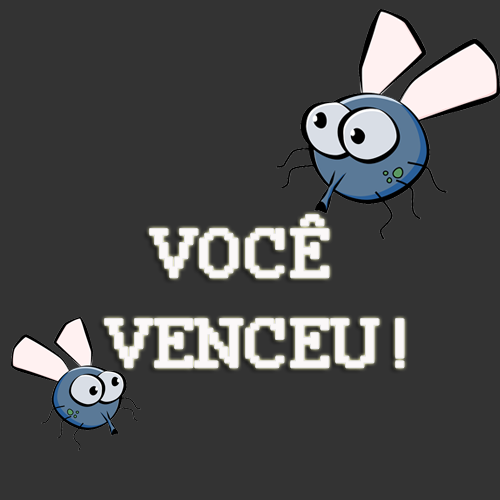
<style>
.page{position:relative;width:500px;height:500px;background:#333333}
.page>*{position:absolute;margin:0}
.t1{font:75.2px "Courier";color:#fbf8f8;font-weight:bold;scale:1.06 1}
</style>
<div class="page">
<p class="t1" style="left:105px;top:215px;width:299px;height:153px;text-align:center">VOCÊ <br>VENCEU!</p>
</div>
